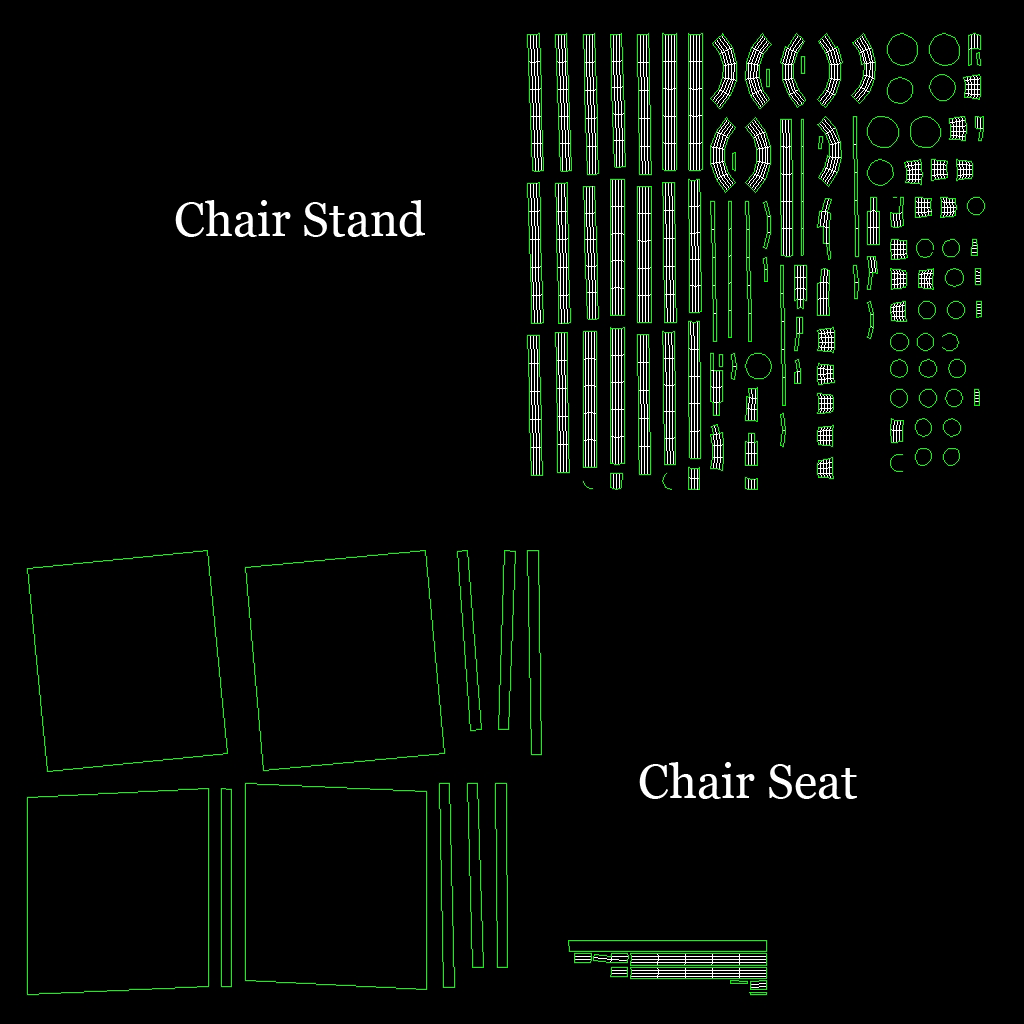
<style>
.page{position:relative;width:1024px;height:1024px;background:#000000}
.page>*{position:absolute;margin:0}
.t1{font:48px "Georgia";color:#ffffff}
</style>
<div class="page">
<p class="t1" style="left:175px;top:200px;width:250px;height:37px">Chair Stand</p>
<p class="t1" style="left:639px;top:762px;width:218px;height:37px">Chair Seat</p>
</div>
